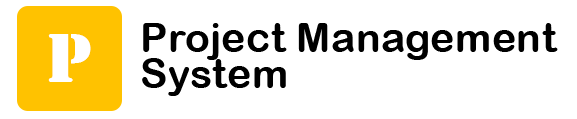
<style>
.page{position:relative;width:577px;height:119px;background:#ffffff}
.page>*{position:absolute;margin:0}
.t1{font:41px/36px "ArialRoundedMTBold";letter-spacing:0.01em;color:#060808}
.t2{font:72px "Stencil";color:#ffffff}
</style>
<div class="page">
<p class="t1" style="left:142px;top:23px;width:416px;height:73px">Project Management <br>System</p>
<p class="t2" style="left:48px;top:34px;width:43px;height:48px">P</p>
</div>
